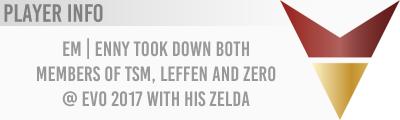
<style>
.page{position:relative;width:400px;height:120px;background:#fafafa}
.page>*{position:absolute;margin:0}
.t1{font:25px "BebasKai";color:#808080}
.t2{font:20.8px "BebasKai";color:#999999}
</style>
<div class="page">
<p class="t1" style="left:4px;top:4px;width:99px;height:18px">Player Info</p>
<p class="t2" style="left:37px;top:38px;width:239px;height:69px;text-align:center">em | enny took down Both<br>members of TSM, leffen and Zero<br>@ evo 2017 with his Zelda</p>
</div>
